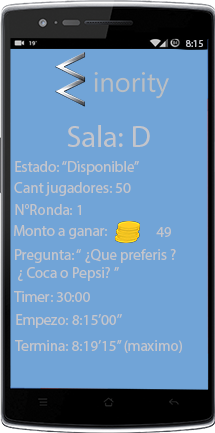
<style>
.page{position:relative;width:215px;height:433px;background:#71a4d7}
.page>*{position:absolute;margin:0}
.t1{font:10px "MyriadPro-Regular";color:#c4c5cb}
.t2{font:30px "MyriadPro-Regular";color:#c4c5cb}
.t3{font:15px "MyriadPro-Regular";color:#c4c5cb}
</style>
<div class="page">
<p class="t1" style="left:186px;top:40px;width:17px;height:7px">8:15</p>
<p class="t2" style="left:67px;top:125px;width:83px;height:22px">Sala: D</p>
<p class="t3" style="left:15px;top:161px;width:124px;height:14px">Estado: “Disponible”</p>
<p class="t3" style="left:14px;top:182px;width:117px;height:14px">Cant jugadores: 50</p>
<p class="t3" style="left:15px;top:204px;width:66px;height:11px">N°Ronda: 1</p>
<p class="t3" style="left:14px;top:225px;width:93px;height:14px">Monto a ganar:</p>
<p class="t3" style="left:156px;top:227px;width:15px;height:10px">49</p>
<p class="t3" style="left:15px;top:249px;width:161px;height:32px">Pregunta: “ ¿Que preferis ? <br> ¿ Coca o Pepsi? ”</p>
<p class="t3" style="left:14px;top:291px;width:76px;height:11px">Timer: 30:00</p>
<p class="t3" style="left:16px;top:314px;width:106px;height:14px">Empezo: 8:15’00’’</p>
<p class="t3" style="left:15px;top:340px;width:167px;height:13px">Termina: 8:19’15’’ (maximo)</p>
</div>
